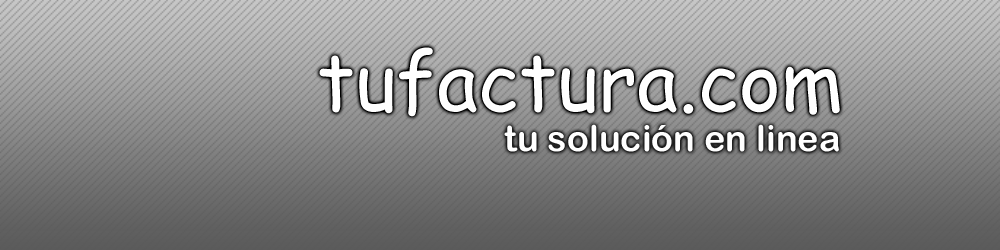
<style>
.page{position:relative;width:1000px;height:250px}
.page>*{position:absolute;margin:0}
.t1{font:80px "ComicSansMS";color:#ffffff}
.t2{font:36px "ArialRoundedMTBold";color:#ffffff}
</style>
<div class="page">
<p class="t1" style="left:319px;top:47px;width:521px;height:70px">tufactura.com</p>
<p class="t2" style="left:504px;top:124px;width:335px;height:28px">tu solución en linea</p>
</div>
